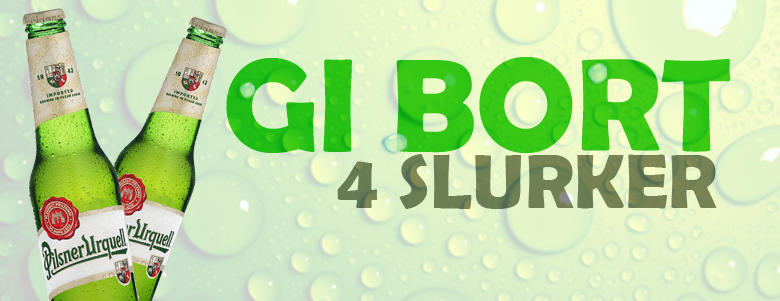
<style>
.page{position:relative;width:780px;height:301px}
.page>*{position:absolute;margin:0}
.t1{font:133.2px "BerlinSansFBDemi-Bold";color:#33c615}
.t2{font:77.4px "BerlinSansFBDemi-Bold";color:#696a69}
</style>
<div class="page">
<p class="t1" style="left:226px;top:57px;width:505px;height:96px">GI BORT</p>
<p class="t2" style="left:337px;top:154px;width:380px;height:55px">4 SLURKER</p>
</div>
